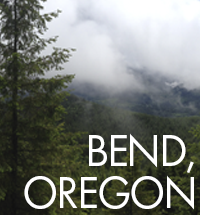
<style>
.page{position:relative;width:200px;height:215px}
.page>*{position:absolute;margin:0}
.t1{font:45.8px/41.7px "FuturaPT-Book";letter-spacing:-0.05em;color:#ffffff}
</style>
<div class="page">
<p class="t1" style="left:24px;top:133px;width:170px;height:77px;text-align:right">BEND,<br>OREGON</p>
</div>
